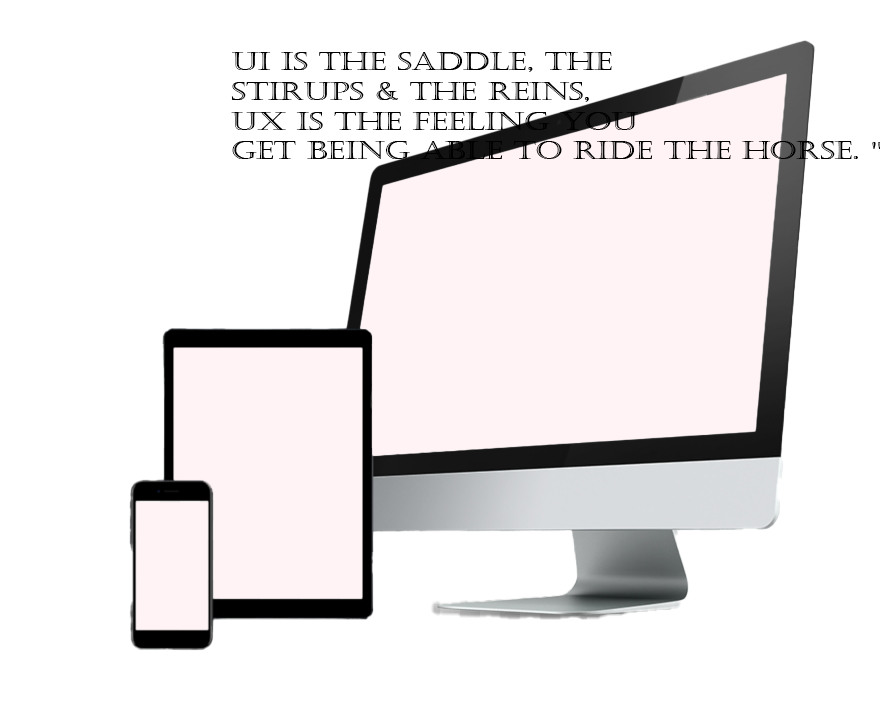
<style>
.page{position:relative;width:880px;height:724px;background:#ffffff}
.page>*{position:absolute;margin:0}
.t1{font:24.8px "Castellar";color:#000000;scale:1.24 1}
.t2{font:0px "Castellar";color:#000000;scale:1.24 1}
</style>
<div class="page">
<p class="t1" style="left:231px;top:52px;width:651px;height:107px"><span class="t2">“““”’’’nnnkjn”</span>UI is the saddle, the <br>stirups &amp; the reins, <br>UX is the feeling you <br>get being able to ride the horse. "</p>
</div>
